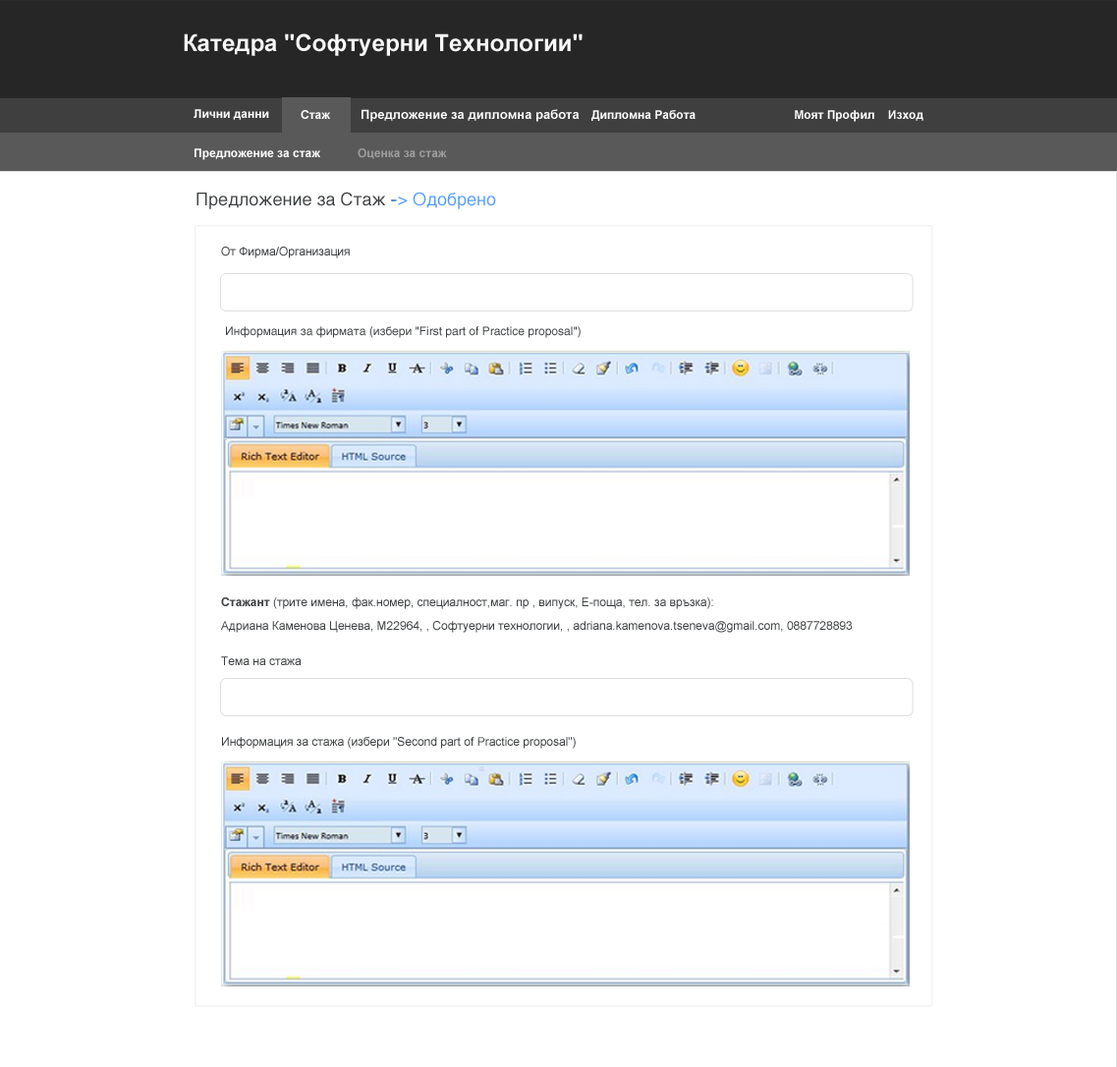
<style>
.page{position:relative;width:1117px;height:1067px;background:#ffffff}
.page>*{position:absolute;margin:0}
.t1{font:23.6px "Arial-BoldMT";color:#f8f8f8}
.t2{font:11.8px "Arial-BoldMT";color:#ffffff}
.t3{font:12.8px "Arial-BoldMT";color:#ffffff}
.t4{font:11.8px "Arial-BoldMT";color:#9d9d9d}
.t5{font:17.7px "HelveticaLTStd-Roman";color:#3c3f41}
.t6{font:17.7px "HelveticaLTStd-Roman";color:#509cfe}
.t7{font:11.8px "ArialMT";color:#3c3f41}
.t8{font:11.8px "HelveticaLTStd-Roman";color:#3c3f41}
.t9{font:11.8px/23.6px "ArialMT";color:#3c3f41}
.t10{font:11.8px/23.6px "Arial-BoldMT";color:#3c3f41}
.t11{font:11.8px/17.7px "ArialMT";color:#3c3f41}
</style>
<div class="page">
<p class="t1" style="left:184px;top:33px;width:399px;height:23px">Катедра "Софтуерни Технологии"</p>
<p class="t2" style="left:194px;top:109px;width:75px;height:11px">Лични данни</p>
<p class="t2" style="left:301px;top:110px;width:29px;height:9px">Стаж</p>
<p class="t3" style="left:362px;top:109px;width:218px;height:13px">Предложение за дипломна работа</p>
<p class="t2" style="left:592px;top:110px;width:104px;height:11px">Дипломна Работа</p>
<p class="t2" style="left:795px;top:110px;width:129px;height:12px">Моят Профил    Изход</p>
<p class="t2" style="left:195px;top:148px;width:125px;height:12px">Предложение за стаж</p>
<p class="t4" style="left:358px;top:148px;width:89px;height:11px">Оценка за стаж</p>
<p class="t5" style="left:197px;top:192px;width:199px;height:17px">Предложение за Стаж -</p>
<p class="t6" style="left:392px;top:192px;width:104px;height:17px">-&gt; Одобрено</p>
<p class="t7" style="left:221px;top:247px;width:129px;height:11px">От Фирма/Организация</p>
<p class="t8" style="left:226px;top:326px;width:355px;height:12px">Информация за фирмата (избери "First part of Practice proposal")</p>
<p class="t9" style="left:221px;top:597px;width:632px;height:36px"><span class="t10">Стажант</span> (трите имена, фак.номер, специалност,маг. пр , випуск, Е-поща, тел. за връзка):<br>Адриана Каменова Ценева, М22964, , Софтуерни технологии, , adriana.kamenova.tseneva@gmail.com, <span class="t11">0887728893</span></p>
<p class="t7" style="left:221px;top:656px;width:81px;height:9px">Тема на стажа</p>
<p class="t7" style="left:222px;top:737px;width:354px;height:12px">Информация за стажа (избери "Second part of Practice proposal")</p>
</div>
